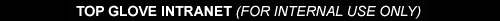
<style>
.page{position:relative;width:500px;height:21px;background:#020202}
.page>*{position:absolute;margin:0}
.t1{font:14px "Arial-ItalicMT";color:#ffffff}
.t2{font:14px "Arial-BoldMT";color:#ffffff}
</style>
<div class="page">
<p class="t1" style="left:76px;top:5px;width:345px;height:14px"><span class="t2">TOP GLOVE INTRANET </span>(FOR INTERNAL USE ONLY)</p>
</div>
